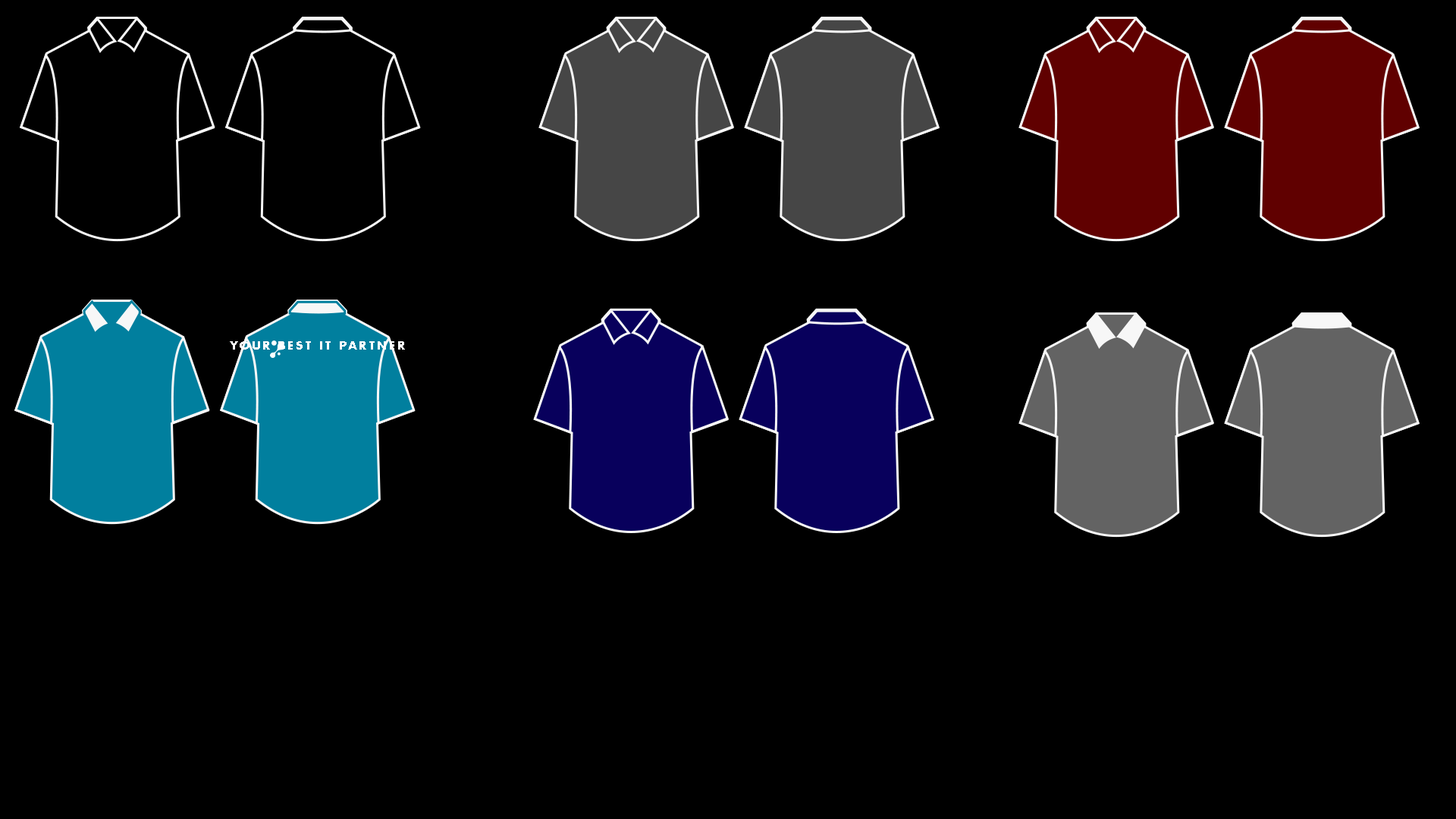
<style>
.page{position:relative;width:1456px;height:819px;background:#000000}
.page>*{position:absolute;margin:0}
.t1{font:11.1px "Futura-Bold";letter-spacing:0.2em;color:#ffffff}
</style>
<div class="page">
<p class="t1" style="left:230px;top:341px;width:175px;height:9px">YOUR BEST IT PARTNER</p>
</div>
